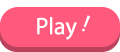
<style>
.page{position:relative;width:120px;height:52px;background:#ff5a7d}
.page>*{position:absolute;margin:0}
.t1{font:24px "MyriadPro-Regular";color:#ffffff}
</style>
<div class="page">
<p class="t1" style="left:37px;top:17px;width:40px;height:23px">Play</p>
<p class="t1" style="left:82px;top:15px;width:8px;height:17px;rotate:21deg">!</p>
</div>
